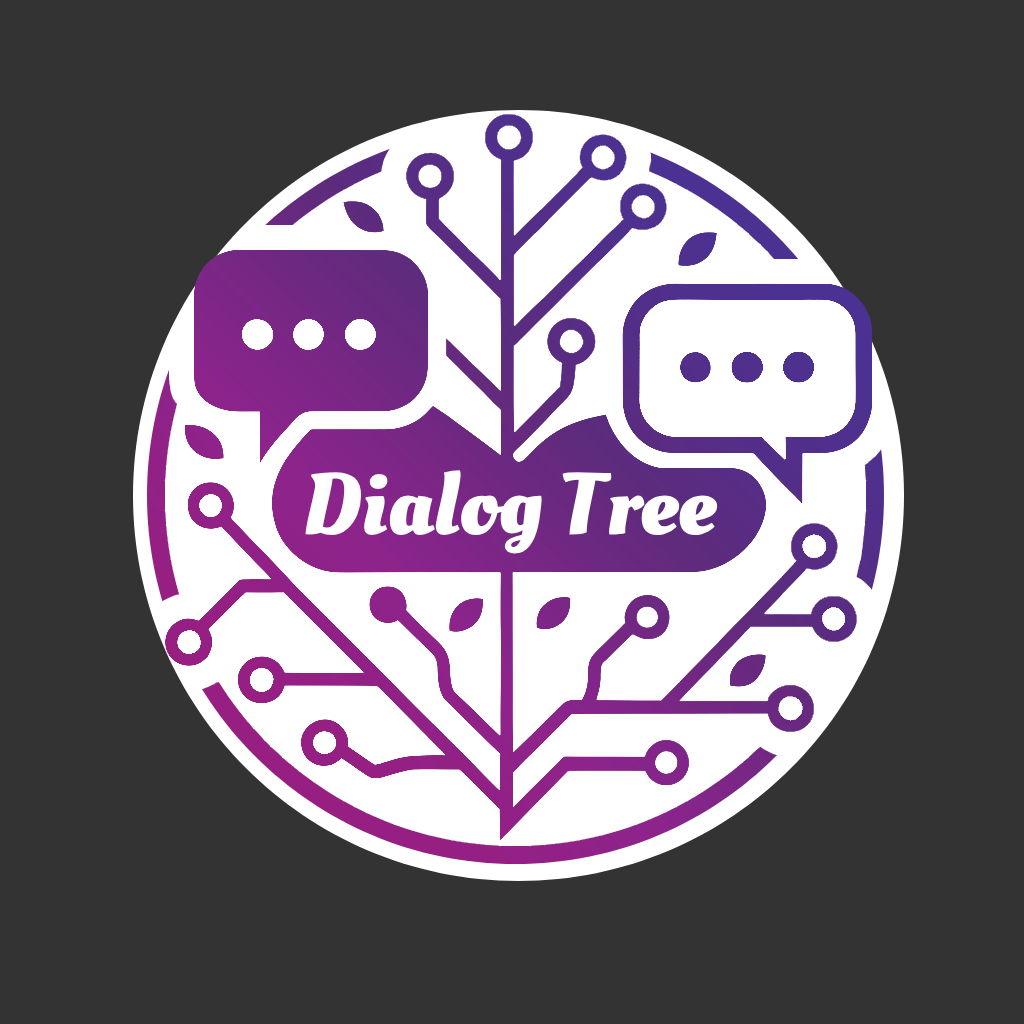
<style>
.page{position:relative;width:1024px;height:1024px;background:#333333}
.page>*{position:absolute;margin:0}
.t1{font:87px "OleoScript-Bold";color:#ffffff}
</style>
<div class="page">
<p class="t1" style="left:305px;top:470px;width:413px;height:84px">Dialog Tree</p>
</div>
